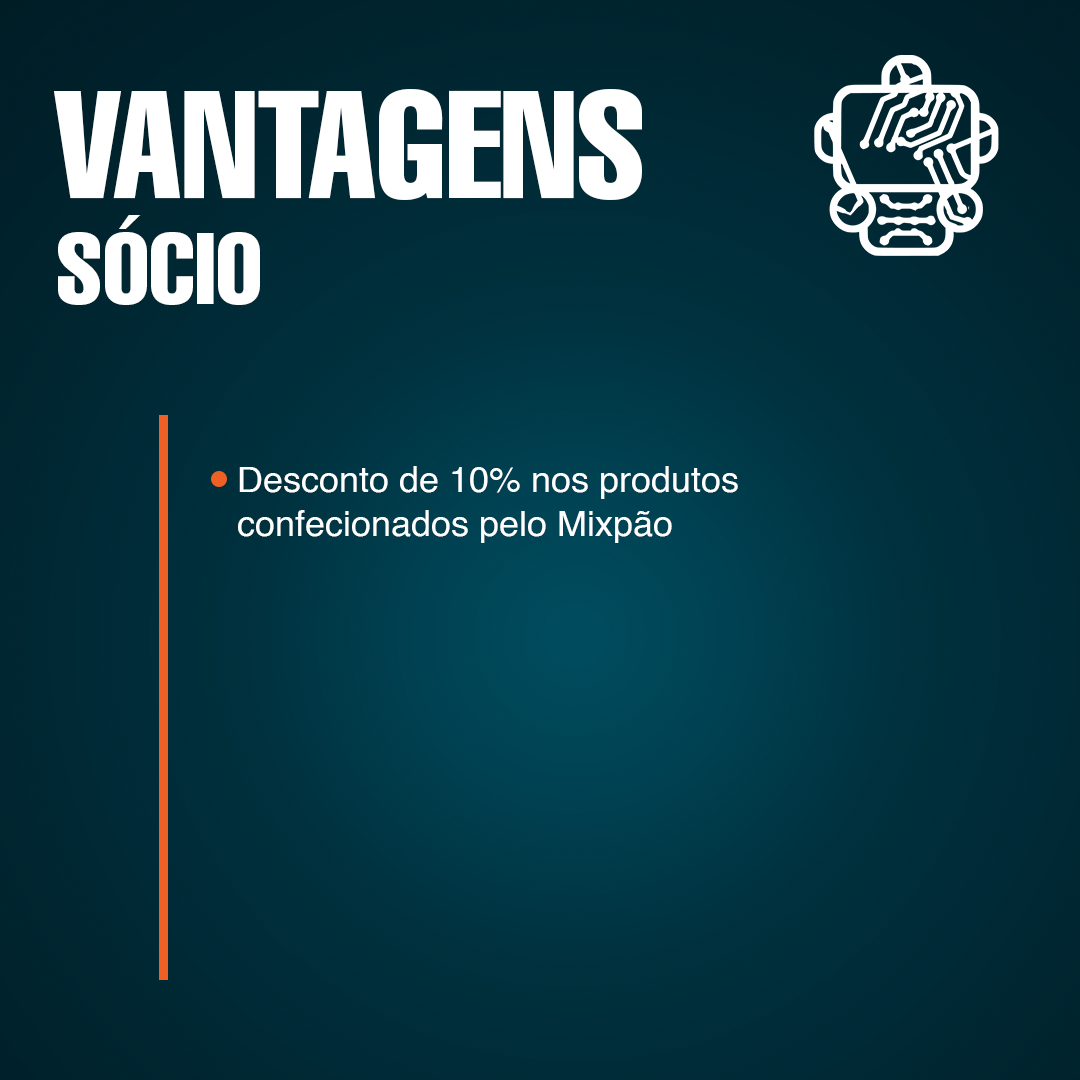
<style>
.page{position:relative;width:1080px;height:1080px}
.page>*{position:absolute;margin:0}
.t1{font:150px "Helvetica-Compressed";color:#ffffff}
.t2{font:100px "Helvetica-Compressed";color:#ffffff}
.t3{font:36px "Helvetica";color:#ffffff}
</style>
<div class="page">
<p class="t1" style="left:54px;top:89px;width:588px;height:111px">VANTAGENS</p>
<p class="t2" style="left:58px;top:215px;width:202px;height:90px">SÓCIO</p>
<p class="t3" style="left:238px;top:466px;width:500px;height:77px">Desconto de 10% nos produtos confecionados pelo Mixpão</p>
</div>
